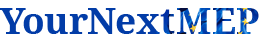
<style>
.page{position:relative;width:270px;height:42px;background:#ffffff}
.page>*{position:absolute;margin:0}
.t1{font:36.6px "DroidSerif-Bold";color:#023ca7}
</style>
<div class="page">
<p class="t1" style="left:0px;top:8px;width:259px;height:26px">YourNextMEP</p>
</div>
